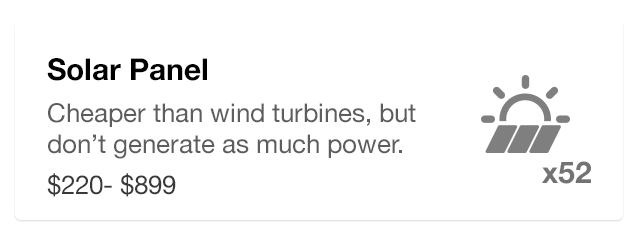
<style>
.page{position:relative;width:640px;height:240px;background:#ffffff}
.page>*{position:absolute;margin:0}
.t1{font:26px "HelveticaNeue";color:#5d5d5d}
.t2{font:30px "HelveticaNeue-Bold";color:#000000}
.t3{font:26px "HelveticaNeue";color:#393939}
.t4{font:30px "HelveticaNeue-Bold";color:#737373}
</style>
<div class="page">
<p class="t1" style="left:47px;top:58px;width:369px;height:139px"><span class="t2">Solar Panel<br></span>Cheaper than wind turbines, but don’t generate as much power.<br><span class="t3">$220- $899</span></p>
<p class="t4" style="left:542px;top:161px;width:49px;height:23px">x52</p>
</div>
